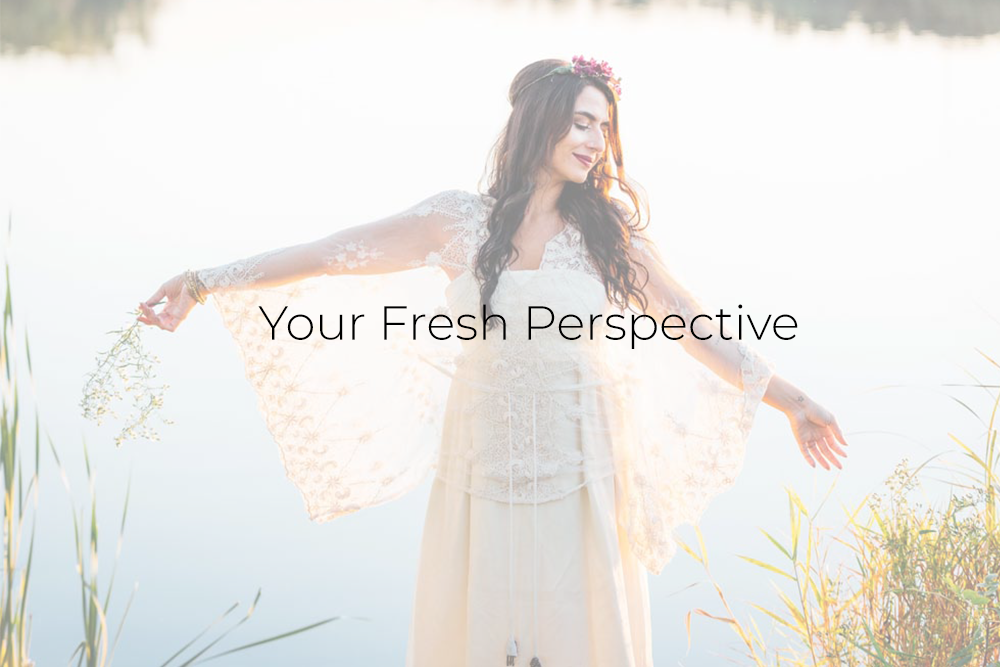
<style>
.page{position:relative;width:1000px;height:667px}
.page>*{position:absolute;margin:0}
.t1{font:48px "Montserrat-Light";color:#000000}
</style>
<div class="page">
<p class="t1" style="left:258px;top:304px;width:540px;height:45px">Your Fresh Perspective</p>
</div>
